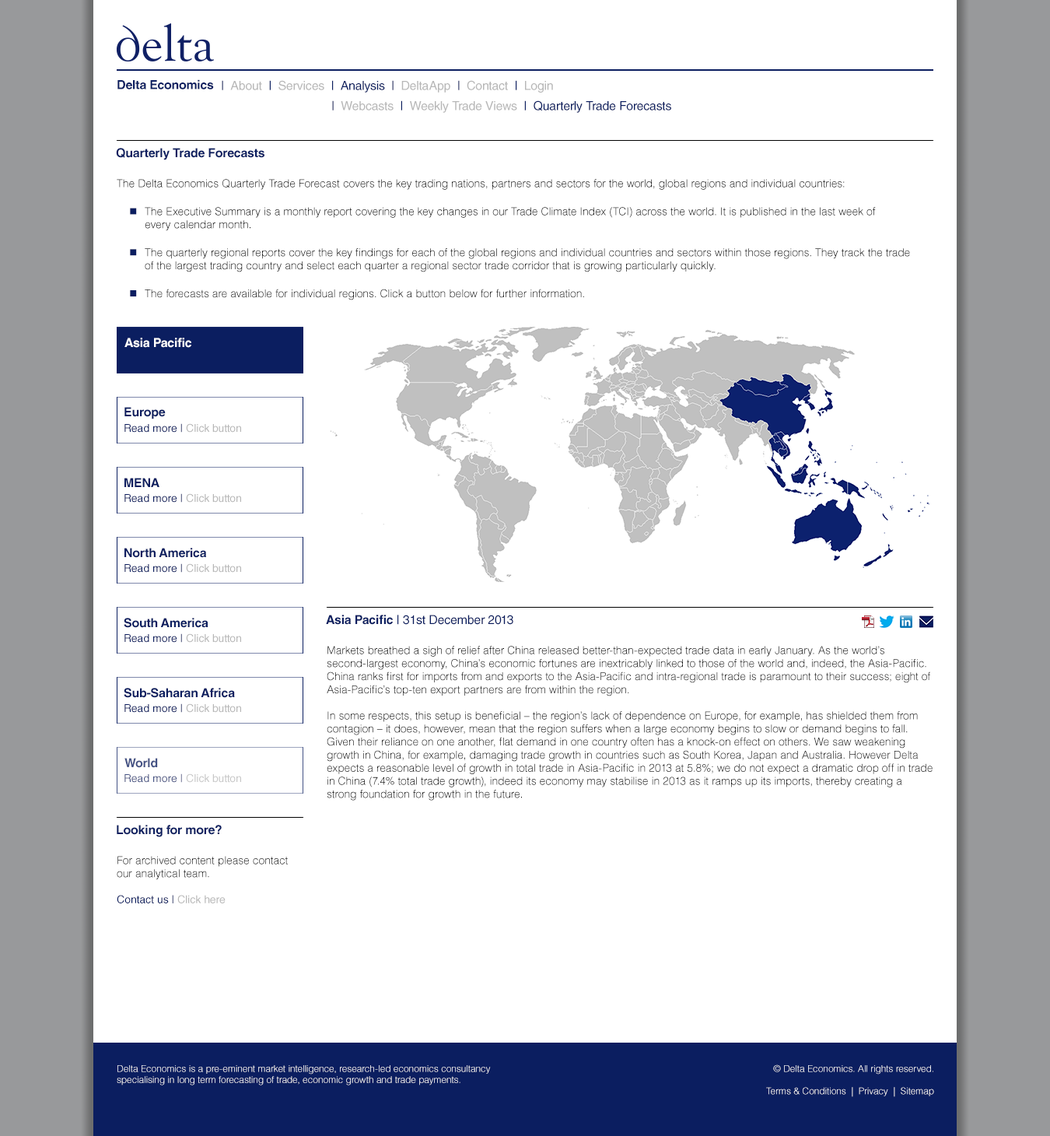
<style>
.page{position:relative;width:1050px;height:1136px;background:#ffffff}
.page>*{position:absolute;margin:0}
.t1{font:12.4px "HelveticaLTStd-Bold";letter-spacing:-0.015em;color:#0b1e60}
.t2{font:12.4px "HelveticaLTStd-Roman";letter-spacing:-0.015em;color:#0b1e60}
.t3{font:12.4px "HelveticaLTStd-Roman";letter-spacing:-0.015em;color:#b7b7b7}
.t4{font:12.4px "HelveticaLTStd-Bold";letter-spacing:-0.015em;color:#ffffff}
.t5{font:10.9px "HelveticaLTStd-Roman";color:#b7b7b7}
.t6{font:10.9px "HelveticaLTStd-Roman";color:#0b1e60}
.t7{font:10.9px "HelveticaLTStd-Light";color:#000000}
.t8{font:12.4px "HelveticaLTStd-Bold";letter-spacing:-0.015em;color:#435285}
.t9{font:10.9px "HelveticaLTStd-Roman"}
.t10{font:10.9px "HelveticaLTStd-Roman";color:#000000}
.t11{font:9.3px "HelveticaLTStd-Light";color:#ffffff}
</style>
<div class="page">
<p class="t1" style="left:117px;top:79px;width:97px;height:10px">Delta Economics</p>
<p class="t2" style="left:222px;top:80px;width:331px;height:13px">|  <span class="t3">About  </span>|  <span class="t3">Services  </span>|  Analysis  |  <span class="t3">DeltaApp  </span>|  <span class="t3">Contact  </span>|  <span class="t3">Login</span></p>
<p class="t2" style="left:332px;top:100px;width:339px;height:13px">|  <span class="t3">Webcasts  </span>|<span class="t3">  Weekly Trade Views</span>  |  Quarterly Trade Forecasts</p>
<p class="t1" style="left:116px;top:148px;width:148px;height:12px">Quarterly Trade Forecasts</p>
<p class="t4" style="left:124px;top:338px;width:67px;height:10px">Asia Pacific</p>
<p class="t1" style="left:124px;top:407px;width:42px;height:12px">Europe</p>
<p class="t5" style="left:124px;top:423px;width:117px;height:9px"><span class="t6">Read more |</span> Click button</p>
<p class="t1" style="left:124px;top:478px;width:35px;height:9px">MENA</p>
<p class="t5" style="left:124px;top:493px;width:117px;height:9px"><span class="t6">Read more |</span> Click button</p>
<p class="t1" style="left:124px;top:548px;width:83px;height:10px">North America</p>
<p class="t5" style="left:124px;top:563px;width:117px;height:9px"><span class="t6">Read more |</span> Click button</p>
<p class="t1" style="left:124px;top:618px;width:84px;height:10px">South America</p>
<p class="t2" style="left:326px;top:614px;width:187px;height:11px"><span class="t1">Asia Pacific </span>| 31st December 2013</p>
<p class="t5" style="left:124px;top:633px;width:117px;height:9px"><span class="t6">Read more |</span> Click button</p>
<p class="t7" style="left:327px;top:646px;width:606px;height:154px">Markets breathed a sigh of relief after China released better-than-expected trade data in early January. As the world’s second-largest economy, China’s economic fortunes are inextricably linked to those of the world and, indeed, the Asia-Pacific. China ranks first for imports from and exports to the Asia-Pacific and intra-regional trade is paramount to their success; eight of Asia-Pacific’s top-ten export partners are from within the region.<br><br>In some respects, this setup is beneficial – the region’s lack of dependence on Europe, for example, has shielded them from contagion – it does, however, mean that the region suffers when a large economy begins to slow or demand begins to fall. Given their reliance on one another, flat demand in one country often has a knock-on effect on others. We saw weakening growth in China, for example, damaging trade growth in countries such as South Korea, Japan and Australia. However Delta expects a reasonable level of growth in total trade in Asia-Pacific in 2013 at 5.8%; we do not expect a dramatic drop off in trade in China (7.4% total trade growth), indeed its economy may stabilise in 2013 as it ramps up its imports, thereby creating a strong foundation for growth in the future.</p>
<p class="t1" style="left:124px;top:688px;width:111px;height:10px">Sub-Saharan Africa</p>
<p class="t5" style="left:124px;top:703px;width:117px;height:9px"><span class="t6">Read more |</span> Click button</p>
<p class="t8" style="left:124px;top:758px;width:34px;height:10px">World</p>
<p class="t9" style="left:124px;top:773px;width:117px;height:9px">Read more | Click button</p>
<p class="t1" style="left:117px;top:824px;width:105px;height:13px">Looking for more?</p>
<p class="t7" style="left:117px;top:856px;width:171px;height:47px"><span class="t10"><br><br><br></span>For archived content please contact our analytical team.<br><br><span class="t6">Contact us | </span><span class="t5">Click here</span></p>
<p class="t11" style="left:117px;top:1065px;width:374px;height:20px">Delta Economics is a pre-eminent market intelligence, research-led economics consultancy<br>specialising in long term forecasting of trade, economic growth and trade payments.</p>
<p class="t11" style="left:766px;top:1064px;width:168px;height:33px;text-align:right">© Delta Economics. All rights reserved.<br><br>Terms &amp; Conditions  |  Privacy  |  Sitemap</p>
</div>
